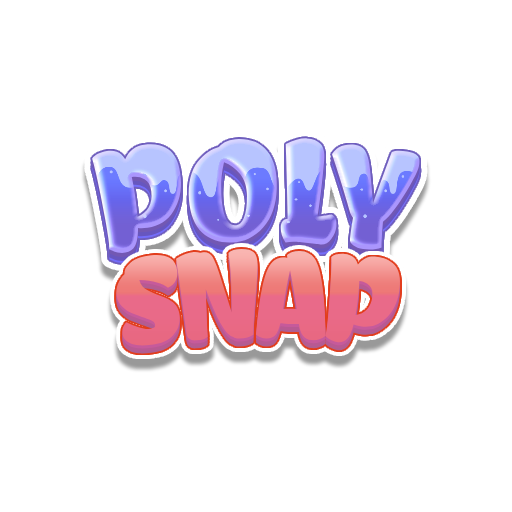
<style>
.page{position:relative;width:512px;height:512px;background:#ffffff}
.page>*{position:absolute;margin:0}
.t1{font:145.5px "ChelaOne-Regular"}
.t2{font:124.7px "ChelaOne-Regular";letter-spacing:-0.04em}
</style>
<div class="page">
<p class="t1" style="left:92px;top:138px;width:328px;height:116px">POLY</p>
<p class="t2" style="left:115px;top:248px;width:286px;height:98px">SNAP</p>
</div>
